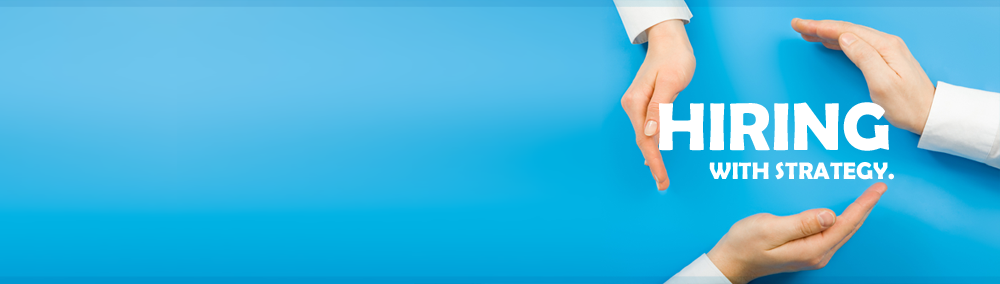
<style>
.page{position:relative;width:1000px;height:284px}
.page>*{position:absolute;margin:0}
.t1{font:68.3px "BerlinSansFBDemi-Bold";color:#ffffff;text-transform:uppercase}
.t2{font:24px "BerlinSansFBDemi-Bold";color:#ffffff;text-transform:uppercase}
</style>
<div class="page">
<p class="t1" style="left:659px;top:102px;width:230px;height:49px">HIRING</p>
<p class="t2" style="left:709px;top:162px;width:185px;height:18px">WITH STRATEGY.</p>
</div>
